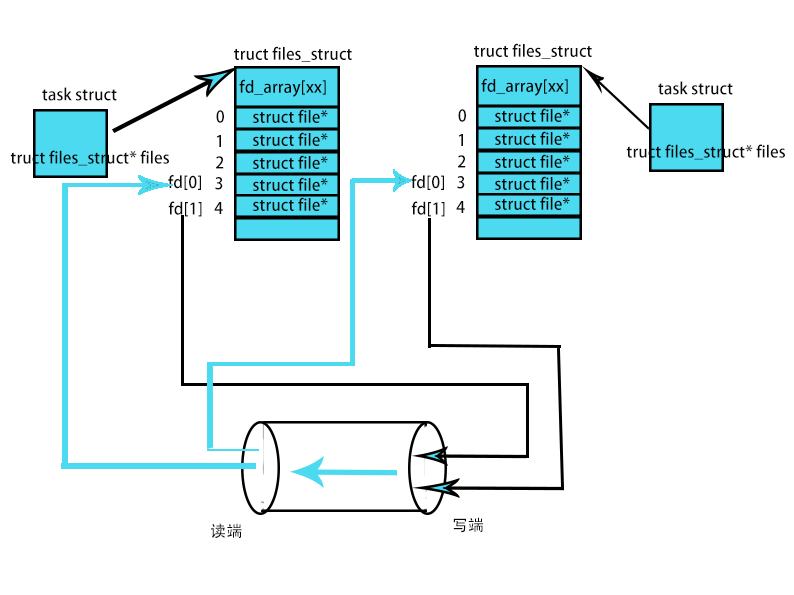
<style>
.page{position:relative;width:794px;height:595px;background:#ffffff}
.page>*{position:absolute;margin:0}
.t1{font:16px "AdobeHeitiStd-Regular";color:#0a0909}
</style>
<div class="page">
<p class="t1" style="left:234px;top:46px;width:118px;height:16px">truct files_struct</p>
<p class="t1" style="left:474px;top:43px;width:118px;height:16px">truct files_struct</p>
<p class="t1" style="left:481px;top:78px;width:87px;height:18px">fd_array[xx]</p>
<p class="t1" style="left:42px;top:87px;width:75px;height:14px">task struct</p>
<p class="t1" style="left:239px;top:79px;width:87px;height:18px">fd_array[xx]</p>
<p class="t1" style="left:658px;top:81px;width:75px;height:14px">task struct</p>
<p class="t1" style="left:216px;top:110px;width:8px;height:13px">0</p>
<p class="t1" style="left:253px;top:109px;width:75px;height:14px">struct file*</p>
<p class="t1" style="left:458px;top:109px;width:8px;height:13px">0</p>
<p class="t1" style="left:495px;top:108px;width:75px;height:14px">struct file*</p>
<p class="t1" style="left:216px;top:135px;width:5px;height:12px">1</p>
<p class="t1" style="left:253px;top:132px;width:75px;height:14px">struct file*</p>
<p class="t1" style="left:458px;top:134px;width:5px;height:12px">1</p>
<p class="t1" style="left:495px;top:131px;width:75px;height:14px">struct file*</p>
<p class="t1" style="left:10px;top:150px;width:159px;height:16px">truct files_struct* files</p>
<p class="t1" style="left:626px;top:144px;width:159px;height:16px">truct files_struct* files</p>
<p class="t1" style="left:216px;top:156px;width:8px;height:13px">2</p>
<p class="t1" style="left:253px;top:155px;width:75px;height:14px">struct file*</p>
<p class="t1" style="left:458px;top:155px;width:8px;height:13px">2</p>
<p class="t1" style="left:495px;top:154px;width:75px;height:14px">struct file*</p>
<p class="t1" style="left:168px;top:175px;width:33px;height:15px">fd[0]</p>
<p class="t1" style="left:215px;top:177px;width:8px;height:13px">3</p>
<p class="t1" style="left:253px;top:177px;width:75px;height:14px">struct file*</p>
<p class="t1" style="left:411px;top:175px;width:33px;height:15px">fd[0]</p>
<p class="t1" style="left:457px;top:176px;width:8px;height:13px">3</p>
<p class="t1" style="left:495px;top:176px;width:75px;height:14px">struct file*</p>
<p class="t1" style="left:253px;top:197px;width:75px;height:14px">struct file*</p>
<p class="t1" style="left:495px;top:196px;width:75px;height:14px">struct file*</p>
<p class="t1" style="left:168px;top:201px;width:34px;height:16px">fd[1]</p>
<p class="t1" style="left:214px;top:202px;width:9px;height:12px">4</p>
<p class="t1" style="left:411px;top:201px;width:34px;height:16px">fd[1]</p>
<p class="t1" style="left:456px;top:201px;width:9px;height:12px">4</p>
<p class="t1" style="left:453px;top:517px;width:30px;height:16px">写端</p>
<p class="t1" style="left:211px;top:523px;width:31px;height:16px">读端</p>
</div>
